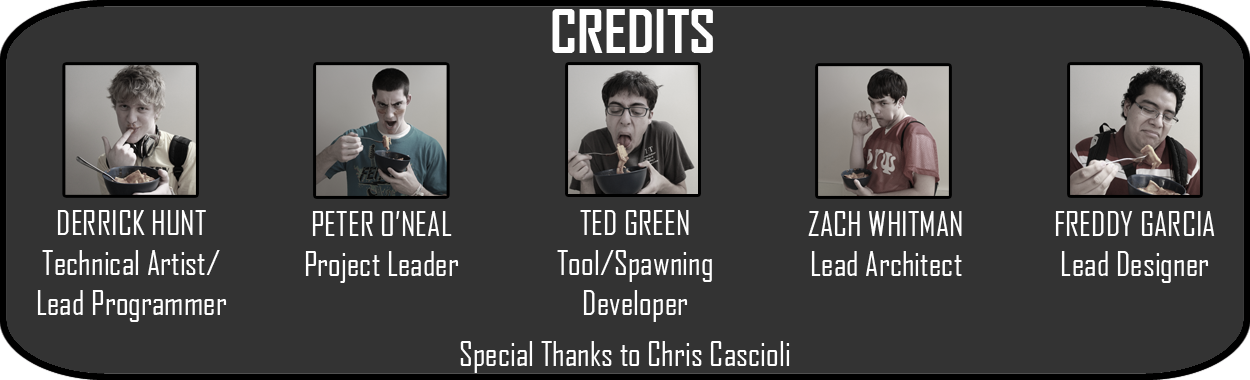
<style>
.page{position:relative;width:1250px;height:380px;background:#333333}
.page>*{position:absolute;margin:0}
.t1{font:58.3px "AgencyFB-Bold";color:#fefefe}
.t2{font:33.3px "AgencyFB-Reg";color:#fefefe}
</style>
<div class="page">
<p class="t1" style="left:552px;top:9px;width:161px;height:44px">CREDITS</p>
<p class="t2" style="left:37px;top:210px;width:190px;height:112px;text-align:center">DERRICK HUNT<br>Technical Artist/<br>Lead Programmer</p>
<p class="t2" style="left:305px;top:211px;width:154px;height:72px;text-align:center">PETER O’NEAL<br>Project Leader</p>
<p class="t2" style="left:557px;top:210px;width:155px;height:112px;text-align:center">TED GREEN<br>Tool/Spawning<br>Developer</p>
<p class="t2" style="left:808px;top:211px;width:154px;height:65px;text-align:center">ZACH WHITMAN<br>Lead Architect</p>
<p class="t2" style="left:1055px;top:211px;width:160px;height:72px;text-align:center">FREDDY GARCIA<br>Lead Designer</p>
<p class="t2" style="left:460px;top:341px;width:330px;height:32px">Special Thanks to Chris Cascioli</p>
</div>
